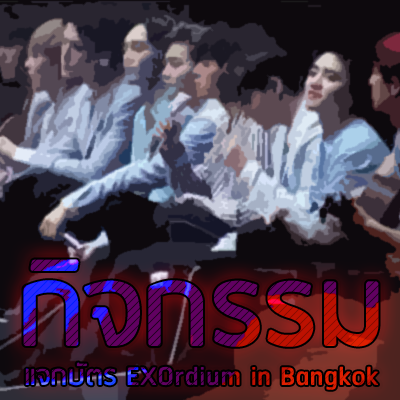
<style>
.page{position:relative;width:400px;height:400px}
.page>*{position:absolute;margin:0}
.t1{font:32.5px "RSU-Bold"}
.t2{font:129.2px "RSU-Bold"}
</style>
<div class="page">
<p class="t1" style="left:23px;top:259px;width:356px;height:131px;text-align:center"><span class="t2">กิจกรรม<br></span>แจกบัตร EXOrdium in Bangkok</p>
<p class="t1" style="left:23px;top:259px;width:356px;height:131px;text-align:center"><span class="t2">กิจกรรม<br></span>แจกบัตร EXOrdium in Bangkok</p>
</div>
